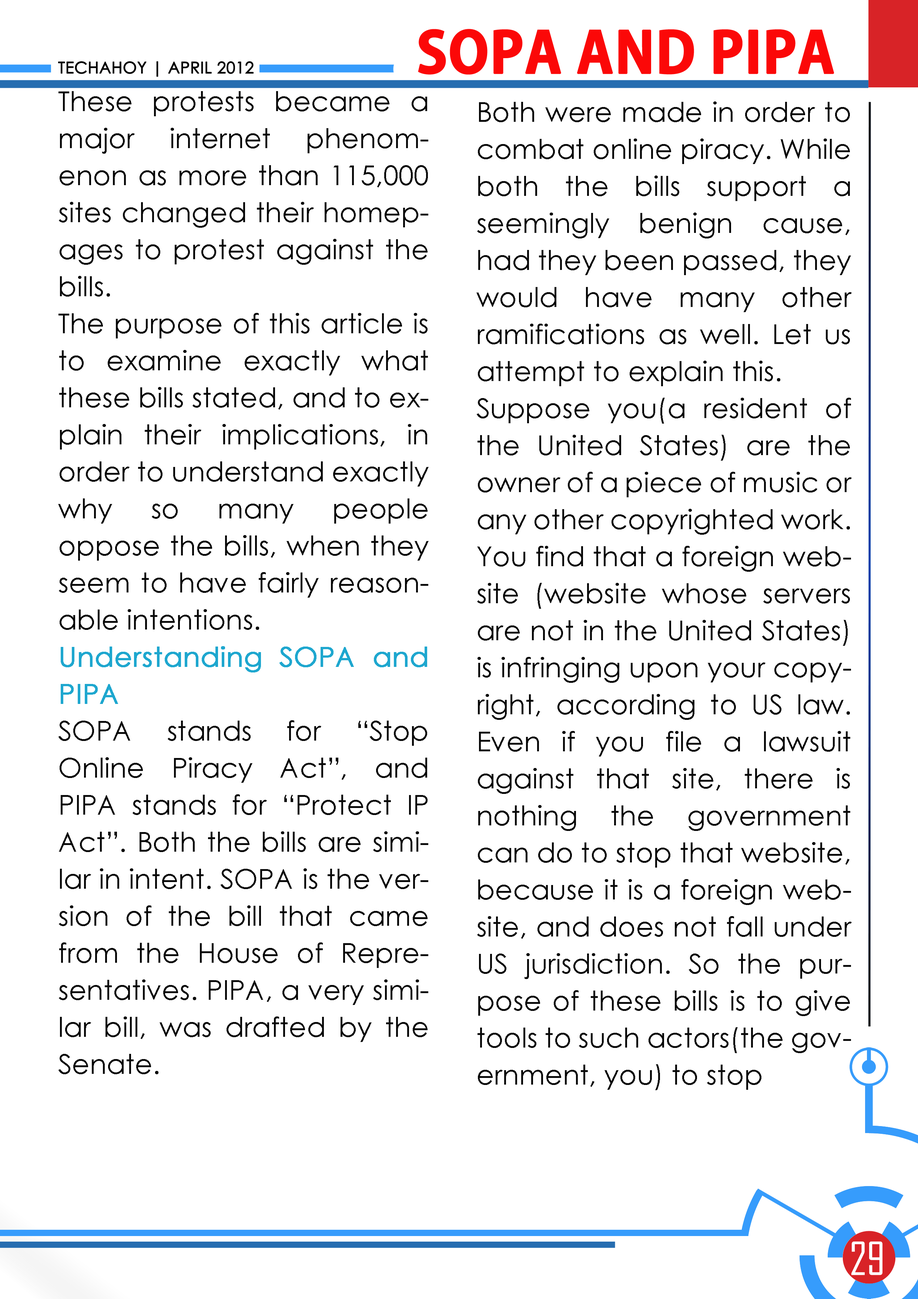
<style>
.page{position:relative;width:918px;height:1299px;background:#ffffff}
.page>*{position:absolute;margin:0}
.t1{font:55.5px "AdobeGothicStd-Bold";color:#fb0808;text-transform:uppercase;font-weight:bold}
.t2{font:16px "CenturyGothic";color:#000000;text-transform:uppercase;font-weight:bold}
.t3{font:27.5px/37px "CenturyGothic";color:#080808}
.t4{font:27.5px/37px "CenturyGothic";color:#1ea7cf;font-weight:bold}
.t5{font:43.7px "AgencyFB-Reg";color:#ffffff;text-transform:uppercase}
</style>
<div class="page">
<p class="t1" style="left:418px;top:29px;width:416px;height:46px">sopa and pipa</p>
<p class="t2" style="left:58px;top:61px;width:196px;height:16px">techahoy | APRIL 2012</p>
<p class="t3" style="left:58px;top:91px;width:371px;height:983px;text-align:justify">These protests became a major internet phenomenon as more than 115,000 sites changed their homepages to protest against the bills.<br>The purpose of this article is to examine exactly what these bills stated, and to explain their implications, in order to understand exactly why so many people oppose the bills, when they seem to have fairly reasonable intentions.<br><span class="t4">Understanding SOPA and PIPA<br></span>SOPA stands for “Stop Online Piracy Act”, and PIPA stands for “Protect IP Act”. Both the bills are similar in intent. SOPA is the version of the bill that came from the House of Representatives. PIPA, a very similar bill, was drafted by the Senate.</p>
<p class="t3" style="left:476px;top:101px;width:376px;height:989px;text-align:justify">Both were made in order to combat online piracy. While both the bills support a seemingly benign cause, had they been passed, they would have many other ramifications as well. Let us attempt to explain this.<br>Suppose you(a resident of the United States) are the owner of a piece of music or any other copyrighted work. You find that a foreign website (website whose servers are not in the United States) is infringing upon your copyright, according to US law. Even if you file a lawsuit against that site, there is nothing the government can do to stop that website, because it is a foreign website, and does not fall under US jurisdiction. So the purpose of these bills is to give tools to such actors(the government, you) to stop</p>
<p class="t5" style="left:852px;top:1241px;width:31px;height:34px">29</p>
</div>
